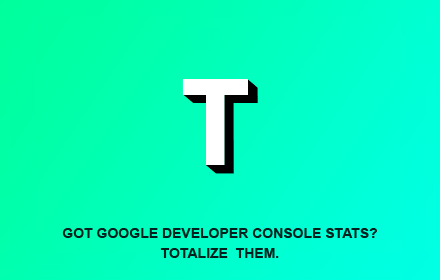
<style>
.page{position:relative;width:440px;height:280px}
.page>*{position:absolute;margin:0}
.t1{font:14px/20px "Arial-BoldMT";color:#00211d;text-transform:uppercase}
</style>
<div class="page">
<p class="t1" style="left:62px;top:228px;width:315px;height:30px;text-align:center">GoT Google Developer Console stats?<br>Totalize  THEM.</p>
</div>
